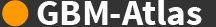
<style>
.page{position:relative;width:216px;height:27px;background:#333333}
.page>*{position:absolute;margin:0}
.t1{font:36.6px "SourceSansPro-Bold";color:#ffffff}
</style>
<div class="page">
<p class="t1" style="left:37px;top:0px;width:165px;height:25px">GBM-Atlas</p>
</div>
